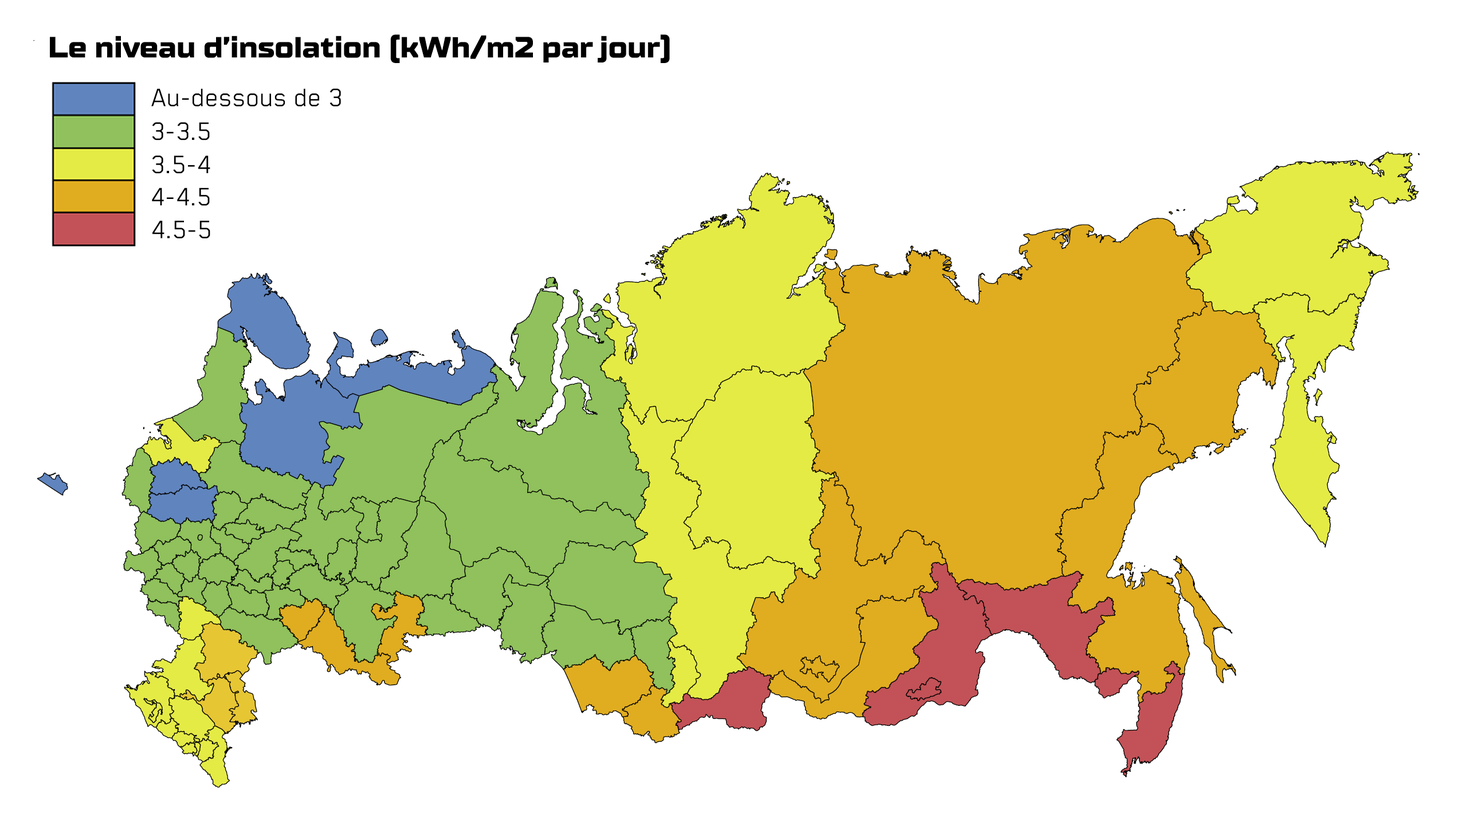
<style>
.page{position:relative;width:1467px;height:813px;background:#ffffff}
.page>*{position:absolute;margin:0}
.t1{font:29.4px "TTSupermolotNeue-ExpXBold";letter-spacing:-0.02em;color:#000000}
.t2{font:29.2px "BlenderPro-Book";color:#000000}
</style>
<div class="page">
<p class="t1" style="left:50px;top:34px;width:620px;height:29px">Le niveau d’insolation (kWh/m2 par jour)</p>
<p class="t2" style="left:151px;top:88px;width:190px;height:19px">Au-dessous de 3</p>
<p class="t2" style="left:152px;top:122px;width:58px;height:18px">3-3.5</p>
<p class="t2" style="left:152px;top:155px;width:58px;height:19px">3.5-4</p>
<p class="t2" style="left:152px;top:187px;width:58px;height:19px">4-4.5</p>
<p class="t2" style="left:152px;top:221px;width:58px;height:17px">4.5-5</p>
</div>
